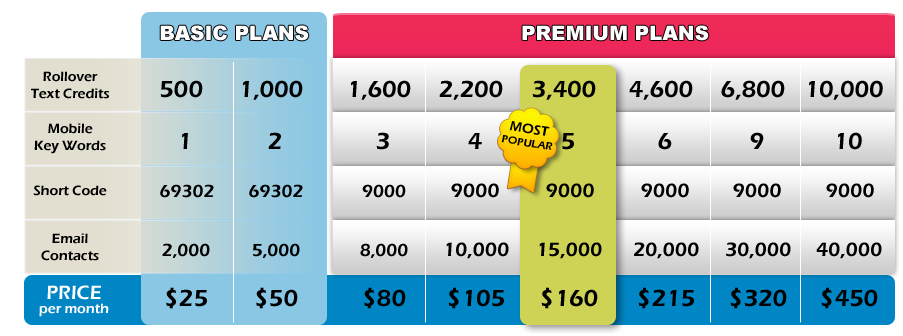
<style>
.page{position:relative;width:903px;height:336px}
.page>*{position:absolute;margin:0}
.t1{font:20px "Arial-Black";color:#ffffff}
.t2{font:20px "Arial-Black";color:#fffefe}
.t3{font:14px "ErasITC-Demi";color:#000000}
.t4{font:24px "ErasITC-Demi";color:#000000}
.t5{font:11px "ErasITC-Demi";color:#000000}
.t6{font:18px "ErasITC-Demi";color:#000000}
.t7{font:20px "ErasITC-Demi";color:#000000}
.t8{font:14px/14px "ErasITC-Demi";color:#ffffff}
.t9{font:20px/14px "ErasITC-Demi";color:#ffffff}
</style>
<div class="page">
<p class="t1" style="left:160px;top:25px;width:149px;height:16px">BASIC PLANS</p>
<p class="t2" style="left:522px;top:25px;width:187px;height:16px">PREMIUM PLANS</p>
<p class="t3" style="left:31px;top:71px;width:78px;height:28px;text-align:center">Rollover<br>Text Credits</p>
<p class="t4" style="left:160px;top:80px;width:43px;height:18px">500</p>
<p class="t4" style="left:243px;top:80px;width:60px;height:20px">1,000</p>
<p class="t4" style="left:351px;top:80px;width:60px;height:20px">1,600</p>
<p class="t4" style="left:439px;top:80px;width:64px;height:20px">2,200</p>
<p class="t4" style="left:532px;top:80px;width:64px;height:20px">3,400</p>
<p class="t4" style="left:629px;top:80px;width:64px;height:20px">4,600</p>
<p class="t4" style="left:721px;top:80px;width:64px;height:20px">6,800</p>
<p class="t4" style="left:809px;top:80px;width:74px;height:20px">10,000</p>
<p class="t3" style="left:34px;top:123px;width:72px;height:31px;text-align:center">Mobile<br>Key Words</p>
<p class="t5" style="left:501px;top:121px;width:52px;height:29px;text-align:center;rotate:9deg"><span class="t3">MOST<br></span>POPULAR</p>
<p class="t4" style="left:182px;top:133px;width:6px;height:16px">1</p>
<p class="t4" style="left:268px;top:132px;width:13px;height:17px">2</p>
<p class="t4" style="left:376px;top:132px;width:13px;height:18px">3</p>
<p class="t4" style="left:468px;top:133px;width:14px;height:16px">4</p>
<p class="t4" style="left:562px;top:133px;width:12px;height:17px">5</p>
<p class="t4" style="left:658px;top:133px;width:14px;height:17px">6</p>
<p class="t4" style="left:750px;top:132px;width:14px;height:17px">9</p>
<p class="t4" style="left:838px;top:132px;width:24px;height:18px">10</p>
<p class="t3" style="left:33px;top:185px;width:74px;height:11px">Short Code</p>
<p class="t6" style="left:160px;top:184px;width:54px;height:14px">69302</p>
<p class="t6" style="left:249px;top:184px;width:54px;height:14px">69302</p>
<p class="t6" style="left:362px;top:184px;width:44px;height:14px">9000</p>
<p class="t7" style="left:451px;top:183px;width:48px;height:15px">9000</p>
<p class="t7" style="left:546px;top:183px;width:48px;height:15px">9000</p>
<p class="t7" style="left:641px;top:183px;width:48px;height:15px">9000</p>
<p class="t7" style="left:733px;top:183px;width:48px;height:15px">9000</p>
<p class="t7" style="left:826px;top:183px;width:48px;height:15px">9000</p>
<p class="t3" style="left:41px;top:233px;width:58px;height:28px;text-align:center">Email<br>Contacts</p>
<p class="t6" style="left:162px;top:243px;width:48px;height:15px">2,000</p>
<p class="t6" style="left:253px;top:243px;width:47px;height:15px">5,000</p>
<p class="t6" style="left:360px;top:243px;width:48px;height:15px">8,000</p>
<p class="t7" style="left:446px;top:242px;width:63px;height:17px">10,000</p>
<p class="t7" style="left:539px;top:242px;width:63px;height:17px">15,000</p>
<p class="t7" style="left:634px;top:242px;width:65px;height:17px">20,000</p>
<p class="t7" style="left:726px;top:242px;width:65px;height:17px">30,000</p>
<p class="t7" style="left:816px;top:242px;width:66px;height:17px">40,000</p>
<p class="t8" style="left:39px;top:285px;width:70px;height:32px;text-align:center"><span class="t9">PRICE<br></span>per month</p>
<p class="t4" style="left:166px;top:287px;width:41px;height:22px">$25</p>
<p class="t4" style="left:256px;top:287px;width:42px;height:22px">$50</p>
<p class="t4" style="left:364px;top:287px;width:42px;height:22px">$80</p>
<p class="t4" style="left:448px;top:287px;width:56px;height:22px">$105</p>
<p class="t4" style="left:541px;top:287px;width:57px;height:22px">$160</p>
<p class="t4" style="left:638px;top:287px;width:56px;height:22px">$215</p>
<p class="t4" style="left:730px;top:287px;width:57px;height:22px">$320</p>
<p class="t4" style="left:821px;top:287px;width:57px;height:22px">$450</p>
</div>
